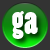
<style>
.page{position:relative;width:50px;height:50px;background:#333333}
.page>*{position:absolute;margin:0}
.t1{font:36px "PoplarStd";color:#ffffff}
</style>
<div class="page">
<p class="t1" style="left:12px;top:11px;width:26px;height:28px">ga</p>
</div>
